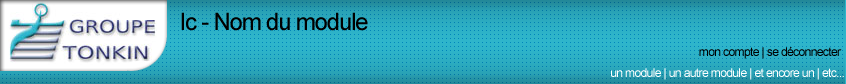
<style>
.page{position:relative;width:846px;height:84px}
.page>*{position:absolute;margin:0}
.t1{font:24px "ArialMT";letter-spacing:-0.05em;color:#000000}
.t2{font:12px "ArialMT";letter-spacing:-0.05em;color:#000000}
.t3{font:12px "ArialMT";letter-spacing:-0.05em;color:#ffffff}
</style>
<div class="page">
<p class="t1" style="left:181px;top:12px;width:187px;height:19px">Ic - Nom du module</p>
<p class="t2" style="left:699px;top:47px;width:143px;height:12px">mon compte | se déconnecter</p>
<p class="t3" style="left:611px;top:68px;width:233px;height:12px">un module | un autre module | et encore un | etc...</p>
</div>
